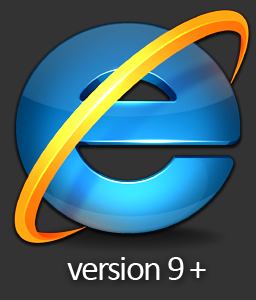
<style>
.page{position:relative;width:256px;height:300px;background:#333333}
.page>*{position:absolute;margin:0}
.t1{font:36px "Calibri";letter-spacing:-0.05em;color:#ffffff}
</style>
<div class="page">
<p class="t1" style="left:67px;top:257px;width:139px;height:23px">version 9 +</p>
</div>
